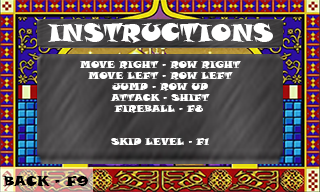
<style>
.page{position:relative;width:320px;height:192px}
.page>*{position:absolute;margin:0}
.t1{font:24px "SnapITC-Regular";color:#ffffff}
.t2{font:10px "SnapITC-Regular";color:#ffffff}
.t3{font:14px "SnapITC-Regular";color:#000000}
</style>
<div class="page">
<p class="t1" style="left:47px;top:23px;width:226px;height:20px">INSTRUCTIONS</p>
<p class="t2" style="left:80px;top:61px;width:161px;height:8px">MOVE RIGHT - ROW RIGHT</p>
<p class="t2" style="left:88px;top:72px;width:145px;height:8px">MOVE LEFT - ROW LEFT</p>
<p class="t2" style="left:112px;top:83px;width:96px;height:8px">JUMP - ROW UP</p>
<p class="t2" style="left:110px;top:94px;width:100px;height:7px">ATTACK - SHIFT</p>
<p class="t2" style="left:114px;top:105px;width:89px;height:8px">FIREBALL - F8</p>
<p class="t2" style="left:111px;top:138px;width:98px;height:7px">SKIP LEVEL - F1</p>
<p class="t3" style="left:2px;top:176px;width:86px;height:10px">BACK - F9</p>
</div>
